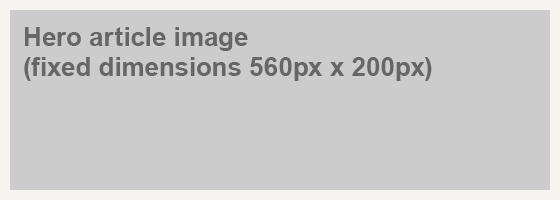
<style>
.page{position:relative;width:560px;height:200px;background:#cccccc}
.page>*{position:absolute;margin:0}
.t1{font:26px/30px "Arial-BoldMT";color:#666666}
</style>
<div class="page">
<p class="t1" style="left:24px;top:27px;width:408px;height:54px">Hero article image<br>(fixed dimensions 560px x 200px)</p>
</div>
